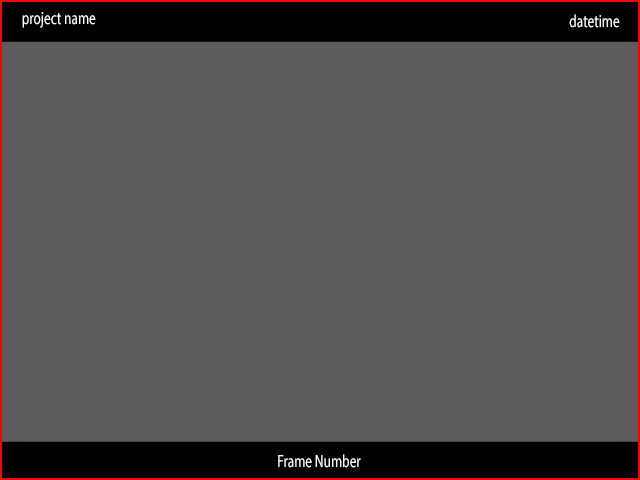
<style>
.page{position:relative;width:640px;height:480px;background:#5c5c5c}
.page>*{position:absolute;margin:0}
.t1{font:17.8px "MyriadPro-Regular";color:#ffffff;scale:0.75 1}
</style>
<div class="page">
<p class="t1" style="left:22px;top:12px;width:74px;height:16px">project name</p>
<p class="t1" style="left:569px;top:14px;width:51px;height:14px">datetime</p>
<p class="t1" style="left:278px;top:454px;width:83px;height:14px">Frame Number</p>
</div>
